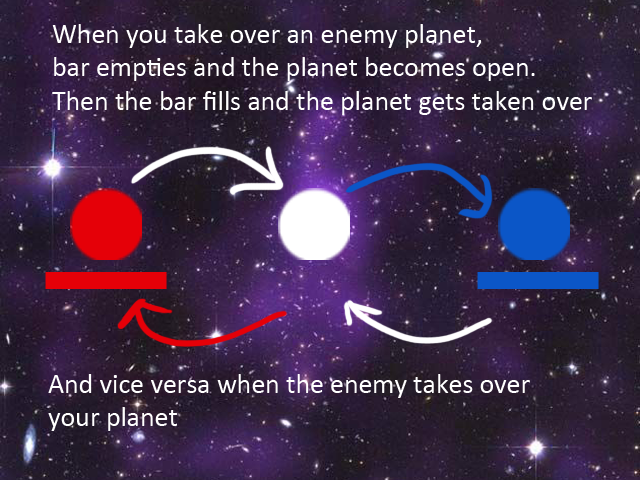
<style>
.page{position:relative;width:640px;height:480px}
.page>*{position:absolute;margin:0}
.t1{font:27.8px "Calibri";color:#ffffff}
</style>
<div class="page">
<p class="t1" style="left:52px;top:24px;width:540px;height:91px">When you take over an enemy planet,<br>bar empties and the planet becomes open.<br>Then the bar fills and the planet gets taken over</p>
<p class="t1" style="left:48px;top:374px;width:482px;height:57px">And vice versa when the enemy takes over<br>your planet</p>
</div>
